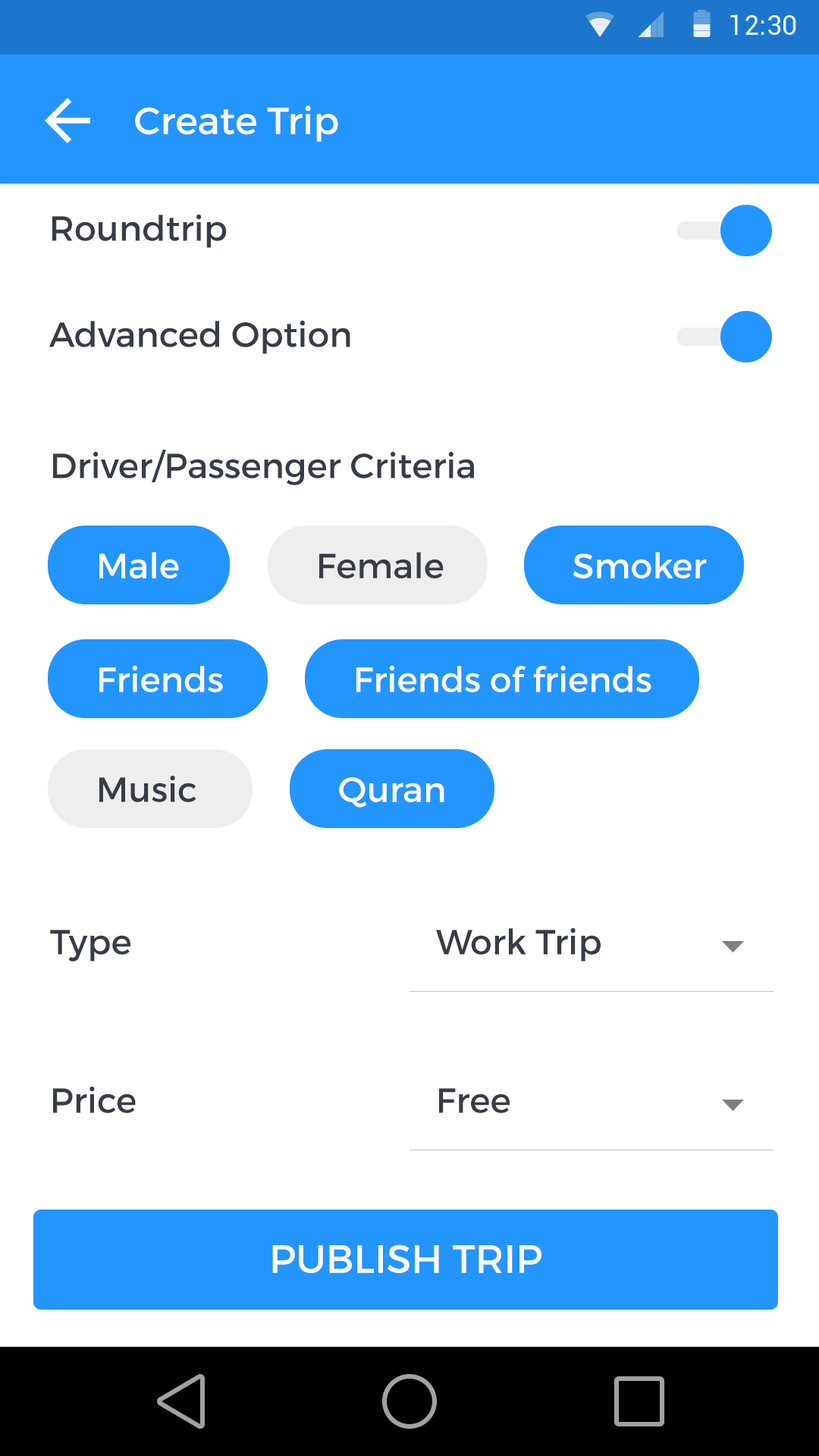
<style>
.page{position:relative;width:819px;height:1456px;background:#ffffff}
.page>*{position:absolute;margin:0}
.t1{font:37.9px "Montserrat-Regular";color:#ffffff}
.t2{font:34.9px "Montserrat-Regular";color:#383c46}
.t3{font:34.9px "Montserrat-Regular";color:#ffffff}
.t4{font:39.4px "Montserrat-Regular";color:#ffffff;text-transform:uppercase}
</style>
<div class="page">
<p class="t1" style="left:135px;top:105px;width:203px;height:37px">Create Trip</p>
<p class="t2" style="left:52px;top:214px;width:175px;height:34px">Roundtrip</p>
<p class="t2" style="left:49px;top:320px;width:301px;height:34px">Advanced Option</p>
<p class="t2" style="left:53px;top:450px;width:421px;height:35px">Driver/Passenger Criteria</p>
<p class="t3" style="left:99px;top:552px;width:80px;height:27px">Male</p>
<p class="t2" style="left:319px;top:552px;width:125px;height:27px">Female</p>
<p class="t3" style="left:573px;top:552px;width:134px;height:27px">Smoker</p>
<p class="t3" style="left:99px;top:665px;width:124px;height:27px">Friends</p>
<p class="t3" style="left:356px;top:665px;width:295px;height:27px">Friends of friends</p>
<p class="t2" style="left:99px;top:775px;width:97px;height:27px">Music</p>
<p class="t3" style="left:339px;top:777px;width:105px;height:31px">Quran</p>
<p class="t2" style="left:50px;top:930px;width:80px;height:32px">Type</p>
<p class="t2" style="left:436px;top:927px;width:165px;height:35px">Work Trip</p>
<p class="t2" style="left:53px;top:1086px;width:83px;height:27px">Price</p>
<p class="t2" style="left:439px;top:1088px;width:71px;height:25px">Free</p>
<p class="t4" style="left:272px;top:1244px;width:269px;height:29px">PUBLISH TRIP</p>
</div>
